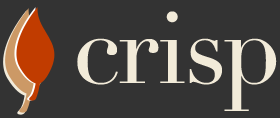
<style>
.page{position:relative;width:280px;height:118px;background:#333333}
.page>*{position:absolute;margin:0}
.t1{font:100px "Didot";letter-spacing:-0.02em;color:#f2ebd9}
</style>
<div class="page">
<p class="t1" style="left:77px;top:11px;width:200px;height:100px">crisp</p>
</div>
